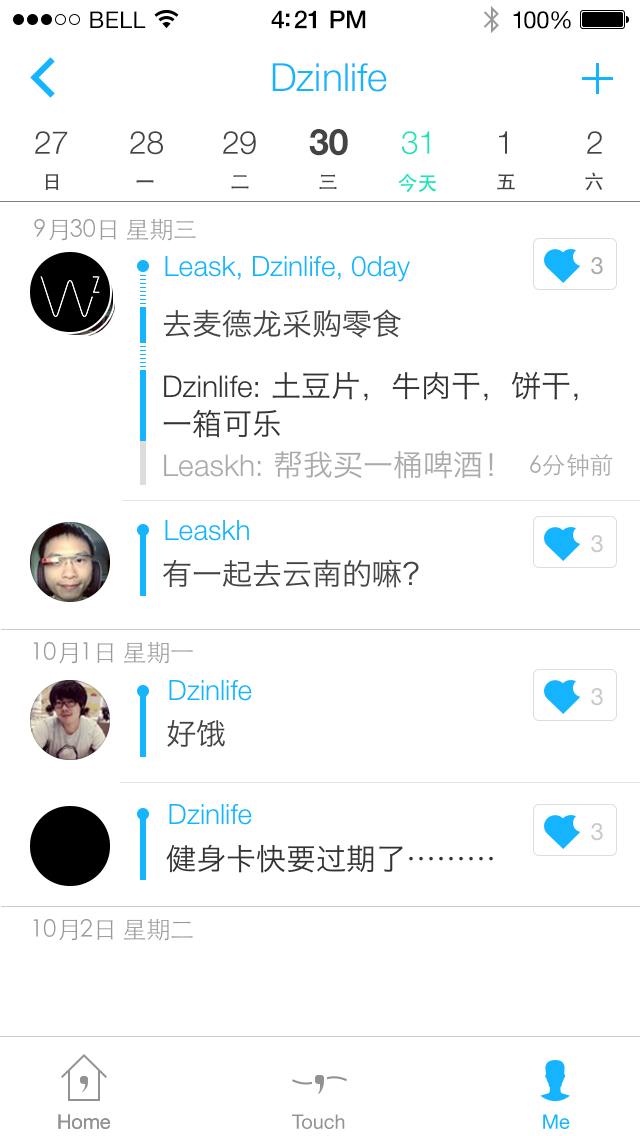
<style>
.page{position:relative;width:640px;height:1136px;background:#ffffff}
.page>*{position:absolute;margin:0}
.t1{font:23px "HelveticaNeue";letter-spacing:0.02em;color:#000000}
.t2{font:25px "HelveticaNeue-Medium";letter-spacing:-0.02em;color:#000000}
.t3{font:24px "HelveticaNeue";letter-spacing:-0.02em;color:#010101}
.t4{font:39px "HelveticaNeue-Light";color:#14b4ff}
.t5{font:32px "HelveticaNeue-Light";letter-spacing:-0.01em;color:#444444}
.t6{font:36px "HelveticaNeue-Bold";letter-spacing:-0.01em;color:#444444}
.t7{font:32px "HelveticaNeue-Light";letter-spacing:-0.01em;color:#1de4b7}
.t8{font:20px "STHeitiSC-Medium";letter-spacing:-0.01em;color:#444444}
.t9{font:20px "STHeitiSC-Medium";letter-spacing:-0.01em;color:#1de4b7}
.t10{font:24px "STHeitiSC-Thin";letter-spacing:-0.01em;color:#999999}
.t11{font:28px "HelveticaNeue-Light";color:#14b4ff}
.t12{font:24px "HelveticaNeue";color:#aaaaaa}
.t13{font:30px "HiraginoSansGB-W3";color:#444444}
.t14{font:30px/38px "HiraginoSansGB-W3";color:#333333}
.t15{font:30px/38px "HelveticaNeue-Light";color:#333333}
.t16{font:30px "HiraginoSansGB-W3";color:#aaaaaa}
.t17{font:30px "HelveticaNeue-Light";color:#aaaaaa}
.t18{font:24px "STHeitiSC-Light";color:#aaaaaa}
.t19{font:24px "HelveticaNeue";color:#c9c9c9}
.t20{font:30px "HiraginoSansGB-W3";color:#333333}
.t21{font:20px "HelveticaNeue";color:#929292}
.t22{font:20px "HelveticaNeue";color:#14b4ff}
</style>
<div class="page">
<p class="t1" style="left:90px;top:11px;width:56px;height:17px">BELL</p>
<p class="t2" style="left:271px;top:10px;width:95px;height:19px">4:21 PM</p>
<p class="t3" style="left:513px;top:11px;width:58px;height:18px">100%</p>
<p class="t4" style="left:272px;top:63px;width:115px;height:29px">Dzinlife</p>
<p class="t5" style="left:35px;top:131px;width:33px;height:23px">27</p>
<p class="t5" style="left:130px;top:131px;width:33px;height:24px">28</p>
<p class="t5" style="left:223px;top:131px;width:33px;height:24px">29</p>
<p class="t6" style="left:309px;top:129px;width:39px;height:27px">30</p>
<p class="t7" style="left:402px;top:131px;width:28px;height:24px">31</p>
<p class="t5" style="left:499px;top:131px;width:8px;height:23px">1</p>
<p class="t5" style="left:587px;top:131px;width:15px;height:23px">2</p>
<p class="t8" style="left:45px;top:174px;width:14px;height:16px">日</p>
<p class="t8" style="left:319px;top:174px;width:18px;height:15px">三</p>
<p class="t9" style="left:398px;top:173px;width:39px;height:19px">今天</p>
<p class="t8" style="left:497px;top:174px;width:18px;height:16px">五</p>
<p class="t8" style="left:585px;top:172px;width:18px;height:19px">六</p>
<p class="t8" style="left:136px;top:180px;width:18px;height:3px">一</p>
<p class="t8" style="left:231px;top:175px;width:18px;height:14px">二</p>
<p class="t10" style="left:34px;top:218px;width:162px;height:23px">9月30日 星期三</p>
<p class="t11" style="left:165px;top:256px;width:245px;height:26px">Leask, Dzinlife, 0day</p>
<p class="t12" style="left:591px;top:257px;width:12px;height:18px">3</p>
<p class="t13" style="left:163px;top:309px;width:238px;height:29px">去麦德龙采购零食</p>
<p class="t14" style="left:163px;top:371px;width:415px;height:67px"><span class="t15">Dzinlife: </span>土豆片，牛肉干，饼干，一箱可乐</p>
<p class="t16" style="left:164px;top:450px;width:329px;height:29px"><span class="t17">Leaskh: </span>帮我买一桶啤酒！</p>
<p class="t18" style="left:530px;top:454px;width:83px;height:23px">6分钟前</p>
<p class="t11" style="left:165px;top:520px;width:84px;height:21px">Leaskh</p>
<p class="t19" style="left:591px;top:535px;width:12px;height:18px">3</p>
<p class="t13" style="left:163px;top:559px;width:256px;height:29px">有一起去云南的嘛？</p>
<p class="t10" style="left:33px;top:641px;width:160px;height:23px">10月1日 星期一</p>
<p class="t11" style="left:169px;top:680px;width:83px;height:21px">Dzinlife</p>
<p class="t19" style="left:591px;top:688px;width:12px;height:18px">3</p>
<p class="t13" style="left:167px;top:720px;width:58px;height:27px">好饿</p>
<p class="t11" style="left:169px;top:804px;width:83px;height:21px">Dzinlife</p>
<p class="t19" style="left:591px;top:823px;width:12px;height:18px">3</p>
<p class="t20" style="left:166px;top:844px;width:327px;height:29px">健身卡快要过期了………</p>
<p class="t10" style="left:33px;top:918px;width:160px;height:23px">10月2日 星期二</p>
<p class="t21" style="left:58px;top:1114px;width:52px;height:15px">Home</p>
<p class="t21" style="left:58px;top:1114px;width:52px;height:15px">Home</p>
<p class="t21" style="left:292px;top:1114px;width:53px;height:15px">Touch</p>
<p class="t22" style="left:543px;top:1114px;width:27px;height:15px">Me</p>
</div>
